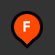
<style>
.page{position:relative;width:55px;height:55px;background:#333333}
.page>*{position:absolute;margin:0}
.t1{font:14px "Avenir-Heavy";color:#ffffff}
</style>
<div class="page">
<p class="t1" style="left:23px;top:21px;width:7px;height:11px">F</p>
</div>
